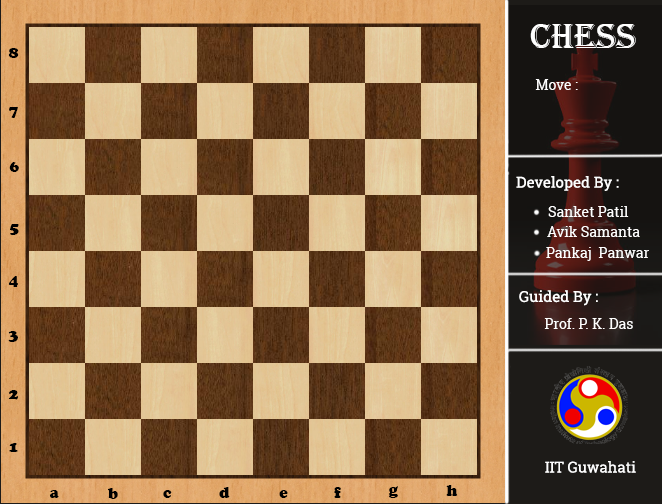
<style>
.page{position:relative;width:662px;height:504px}
.page>*{position:absolute;margin:0}
.t1{font:36px "Algerian";color:#ffffff}
.t2{font:14px "RobotoSlab-Regular";color:#ffffff}
.t3{font:15px "RobotoSlab-Regular";color:#ffffff}
</style>
<div class="page">
<p class="t1" style="left:530px;top:24px;width:106px;height:24px">CHESS</p>
<p class="t2" style="left:535px;top:79px;width:43px;height:11px">Move :</p>
<p class="t3" style="left:516px;top:176px;width:103px;height:15px">Developed By :</p>
<p class="t2" style="left:548px;top:206px;width:81px;height:11px">Sanket Patil</p>
<p class="t2" style="left:547px;top:226px;width:93px;height:11px">Avik Samanta</p>
<p class="t2" style="left:546px;top:247px;width:103px;height:14px">Pankaj  Panwar</p>
<p class="t3" style="left:519px;top:290px;width:79px;height:16px">Guided By :</p>
<p class="t2" style="left:544px;top:318px;width:89px;height:11px">Prof. P. K. Das</p>
<p class="t3" style="left:545px;top:461px;width:91px;height:12px">IIT Guwahati</p>
</div>
